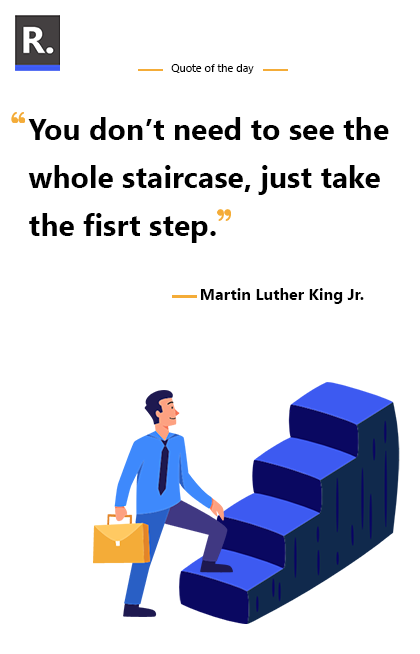
<style>
.page{position:relative;width:420px;height:654px;background:#ffffff}
.page>*{position:absolute;margin:0}
.t1{font:11px "SegoeUI";color:#000000}
.t2{font:30.1px/48.1px "SegoeUI-Bold";color:#000000}
.t3{font:16px "SegoeUI-Bold";color:#000000}
</style>
<div class="page">
<p class="t1" style="left:171px;top:64px;width:83px;height:10px">Quote of the day</p>
<p class="t2" style="left:28px;top:117px;width:361px;height:126px;text-align:right">You don’t need to see the whole staircase, just take the fisrt step.</p>
<p class="t3" style="left:201px;top:288px;width:163px;height:16px">Martin Luther King Jr.</p>
</div>
